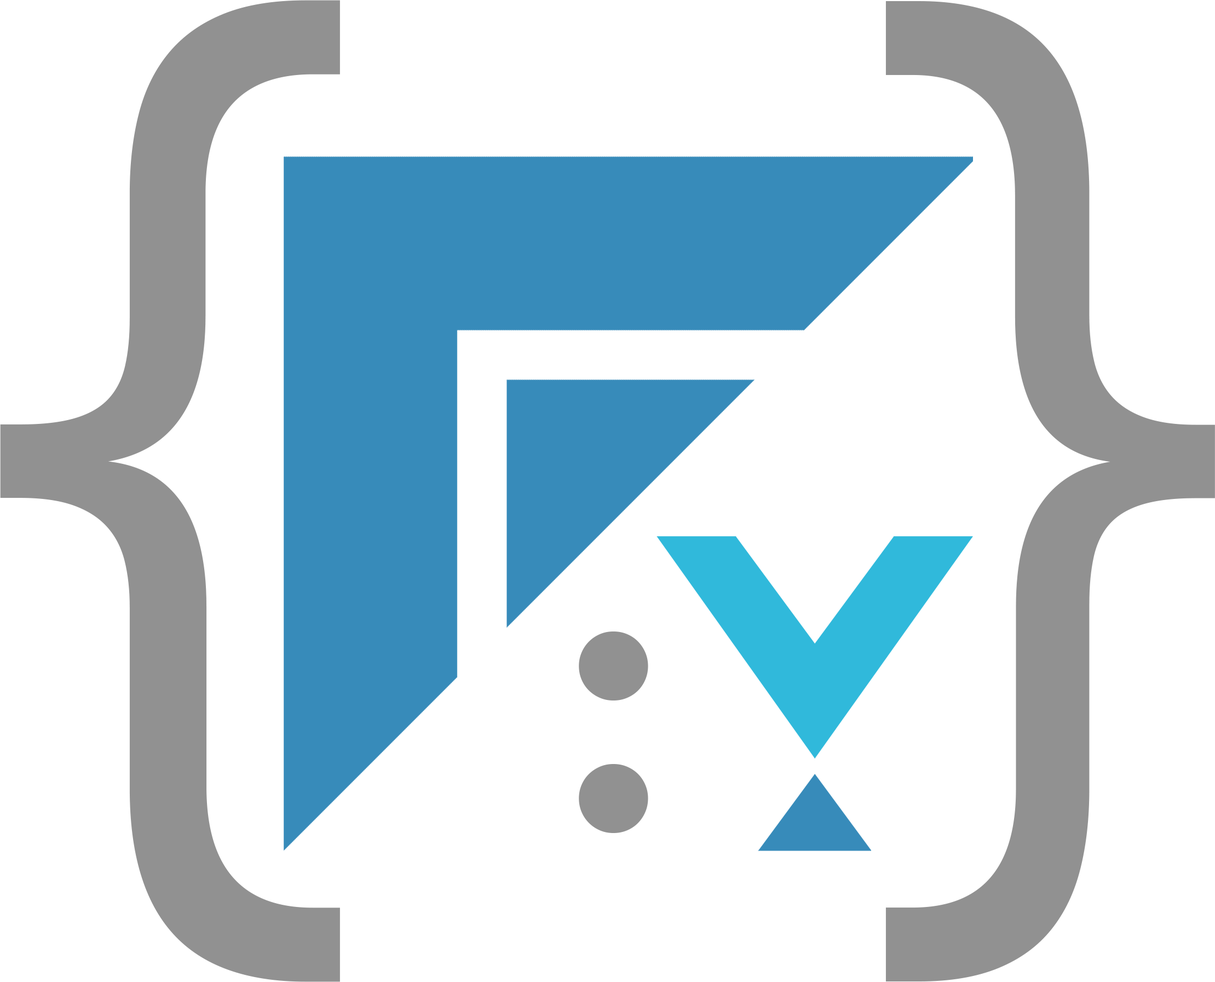
<style>
.page{position:relative;width:1215px;height:982px;background:#ffffff}
.page>*{position:absolute;margin:0}
.t1{font:1081.1px "Consolas";letter-spacing:0.05em;color:#919191;scale:0.87 1}
.t2{font:1080.3px "Consolas";letter-spacing:0.05em;color:#919191;scale:0.85 1}
.t3{font:393px "Consolas-Bold";letter-spacing:0.05em;color:#919191}
</style>
<div class="page">
<p class="t1" style="left:0px;top:0px;width:340px;height:982px">{</p>
<p class="t2" style="left:885px;top:1px;width:330px;height:980px">}</p>
<p class="t3" style="left:579px;top:631px;width:69px;height:202px">:</p>
</div>
